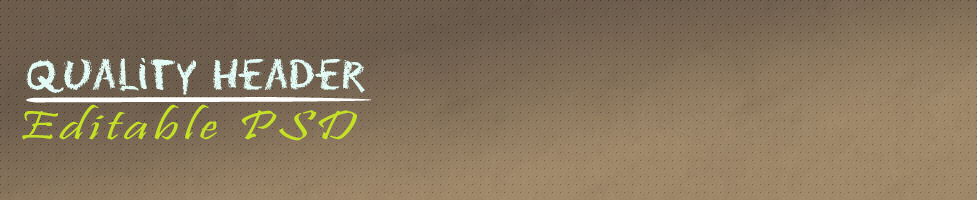
<style>
.page{position:relative;width:977px;height:200px}
.page>*{position:absolute;margin:0}
.t1{font:39px "Eraser-Regular";color:#e2fbf5}
.t2{font:41.8px "Pristina-Regular";letter-spacing:0.075em;color:#c5e124;scale:1.47 1}
</style>
<div class="page">
<p class="t1" style="left:26px;top:58px;width:339px;height:37px">Quality Header</p>
<p class="t2" style="left:22px;top:104px;width:335px;height:37px">Editable PSD</p>
</div>
